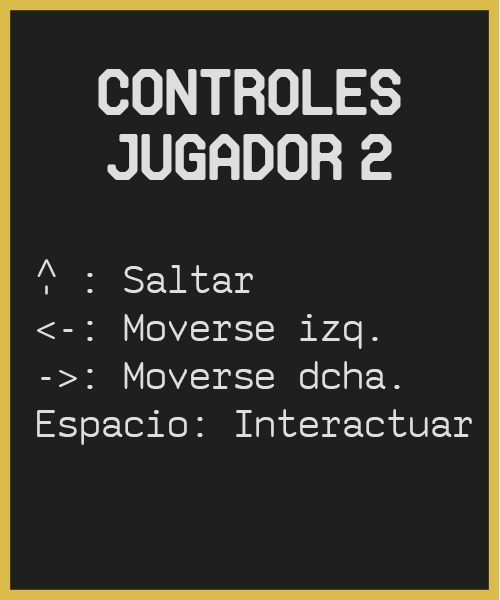
<style>
.page{position:relative;width:500px;height:600px;background:#1f1f1f}
.page>*{position:absolute;margin:0}
.t1{font:54px "Makisupa";color:#dedede}
.t2{font:40px "saxMono";color:#dedede}
</style>
<div class="page">
<p class="t1" style="left:98px;top:69px;width:303px;height:111px;text-align:center">CONTROLES<br>JUGADOR 2</p>
<p class="t2" style="left:36px;top:265px;width:436px;height:180px">W : Saltar<br>&lt;-: Moverse izq.<br>-&gt;: Moverse dcha.<br>Espacio: Interactuar</p>
<p class="t2" style="left:37px;top:259px;width:19px;height:36px;rotate:90deg">&lt;-</p>
</div>
